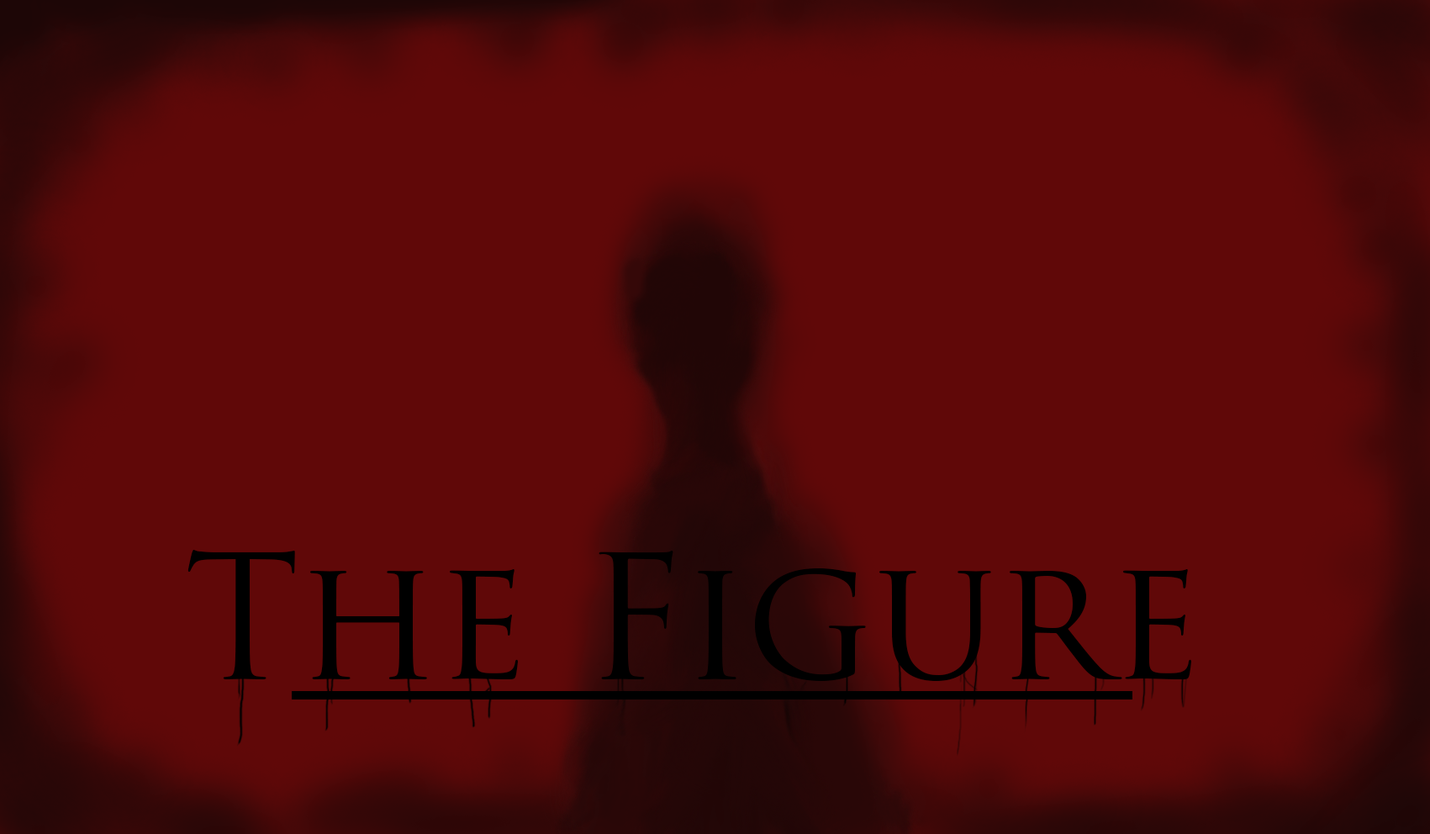
<style>
.page{position:relative;width:1430px;height:834px;background:#600808}
.page>*{position:absolute;margin:0}
.t1{font:168.1px "TrajanPro-Regular";color:#000000}
</style>
<div class="page">
<p class="t1" style="left:187px;top:550px;width:1004px;height:131px">The Figure</p>
</div>
